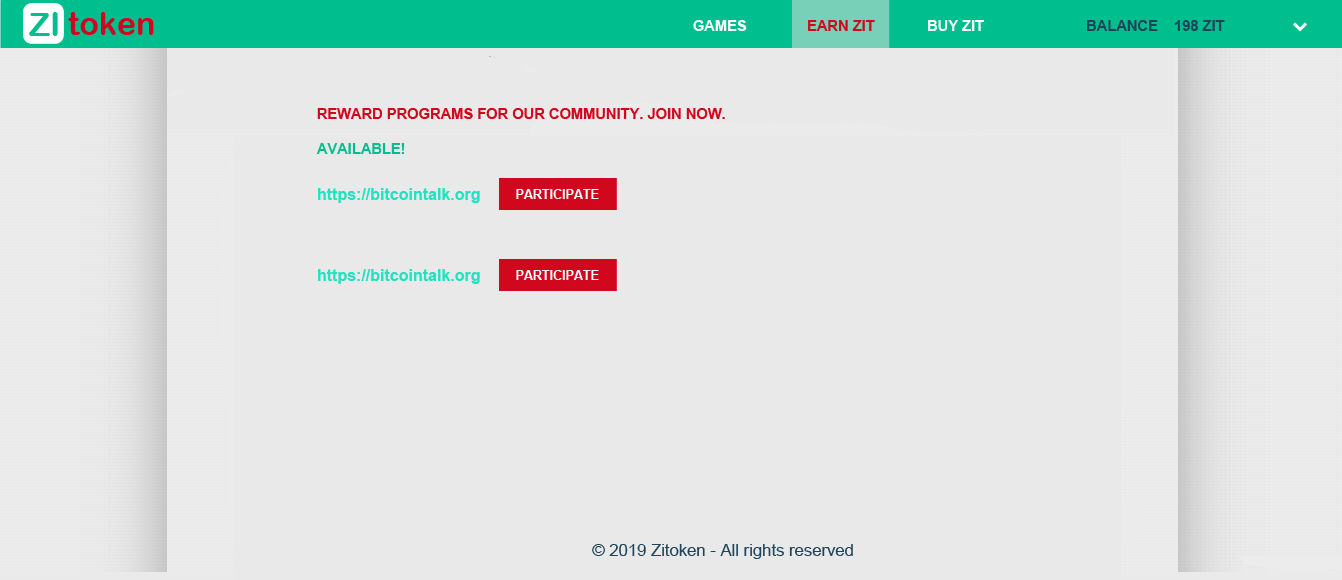
<style>
.page{position:relative;width:1342px;height:580px;background:#e9e9e9}
.page>*{position:absolute;margin:0}
.t1{font:33.3px "ArialRoundedMTBold";color:#00be8e}
.t2{font:32px "ArialRoundedMTBold";color:#d1071e}
.t3{font:14.7px "Arial-BoldMT";color:#ffffff}
.t4{font:14.7px "Arial-BoldMT";color:#d1071e}
.t5{font:14.7px "Arial-BoldMT";color:#1d4459}
.t6{font:14.7px "Arial-BoldMT";color:#00be8e}
.t7{font:16px "Arial-BoldMT";color:#1ee3c0}
.t8{font:12.5px "Arial-BoldMT";color:#ffffff}
.t9{font:16.7px "ArialMT";color:#1d4459}
</style>
<div class="page">
<p class="t1" style="left:29px;top:12px;width:29px;height:24px">ZI</p>
<p class="t2" style="left:68px;top:12px;width:86px;height:23px">token</p>
<p class="t3" style="left:693px;top:20px;width:54px;height:11px">GAMES</p>
<p class="t4" style="left:808px;top:20px;width:67px;height:11px">EARN ZIT</p>
<p class="t3" style="left:928px;top:20px;width:56px;height:11px">BUY ZIT</p>
<p class="t5" style="left:1087px;top:20px;width:138px;height:11px">BALANCE    198 ZIT</p>
<p class="t4" style="left:316px;top:108px;width:409px;height:46px">REWARD PROGRAMS FOR OUR COMMUNITY. JOIN NOW. <br><br><span class="t6">AVAILABLE!</span></p>
<p class="t7" style="left:318px;top:188px;width:162px;height:15px">https://bitcointalk.org</p>
<p class="t8" style="left:516px;top:189px;width:83px;height:10px">PARTICIPATE</p>
<p class="t7" style="left:318px;top:269px;width:162px;height:15px">https://bitcointalk.org</p>
<p class="t8" style="left:516px;top:270px;width:83px;height:10px">PARTICIPATE</p>
<p class="t9" style="left:592px;top:544px;width:261px;height:15px">© 2019 Zitoken - All rights reserved</p>
</div>
